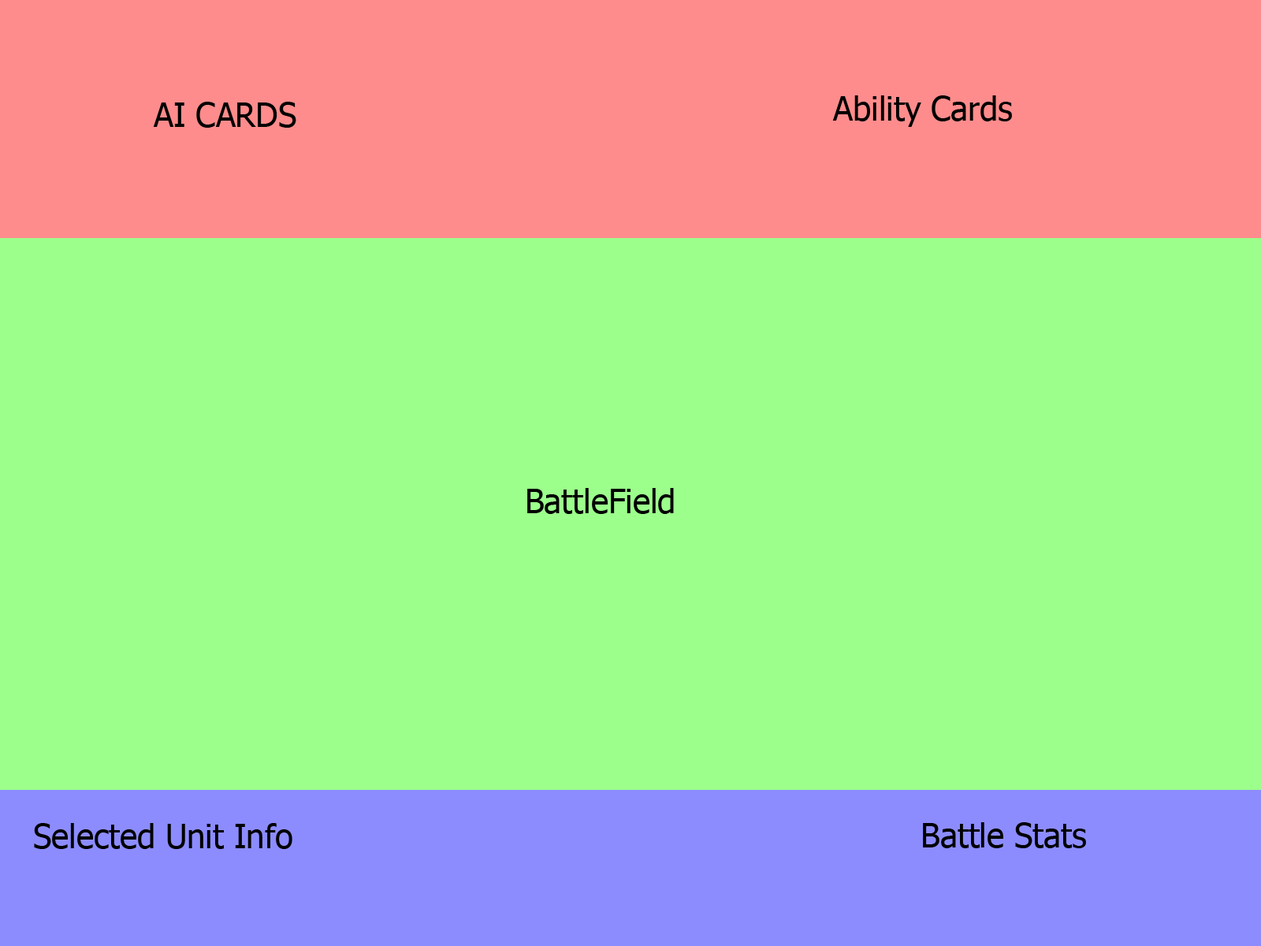
<style>
.page{position:relative;width:1261px;height:946px;background:#9cff8c}
.page>*{position:absolute;margin:0}
.t1{font:32.8px "Tahoma";color:#000000}
</style>
<div class="page">
<p class="t1" style="left:153px;top:102px;width:143px;height:26px">AI CARDS</p>
<p class="t1" style="left:832px;top:95px;width:180px;height:32px">Ability Cards</p>
<p class="t1" style="left:527px;top:488px;width:147px;height:26px">BattleField</p>
<p class="t1" style="left:923px;top:822px;width:163px;height:26px">Battle Stats</p>
<p class="t1" style="left:34px;top:823px;width:258px;height:26px">Selected Unit Info</p>
</div>
